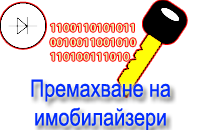
<style>
.page{position:relative;width:200px;height:130px;background:#ffffff}
.page>*{position:absolute;margin:0}
.t1{font:24px "ArialNarrow";color:#032cfd}
</style>
<div class="page">
<p class="t1" style="left:31px;top:79px;width:140px;height:52px;text-align:center">Премахване на имобилайзери</p>
</div>
